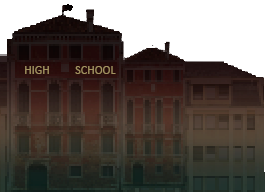
<style>
.page{position:relative;width:265px;height:192px;background:#ffffff}
.page>*{position:absolute;margin:0}
.t1{font:12px "Calibri";color:#a29260}
</style>
<div class="page">
<p class="t1" style="left:25px;top:66px;width:24px;height:8px">HIGH</p>
<p class="t1" style="left:75px;top:66px;width:41px;height:8px">SCHOOL</p>
</div>
